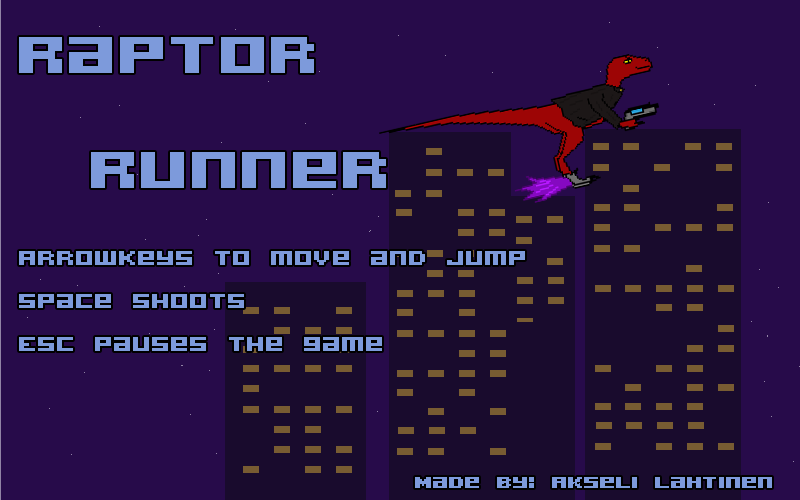
<style>
.page{position:relative;width:800px;height:500px;background:#270b4a}
.page>*{position:absolute;margin:0}
.t1{font:36px "AcknowledgeTT-BRK-";color:#7d9adb}
.t2{font:96px "AcknowledgeTT-BRK-";color:#7d9adb}
.t3{font:30px "AcknowledgeTT-BRK-";color:#7d9adb}
</style>
<div class="page">
<p class="t1" style="left:19px;top:37px;width:753px;height:451px"><span class="t2">Raptor<br>  Runner<br><br><br></span>Arrowkeys to move and jump<br>Space shoots<br>Esc Pauses the game<br><br><br><br><br><br><br><span class="t3">           Made by: Akseli Lahtinen</span></p>
</div>
